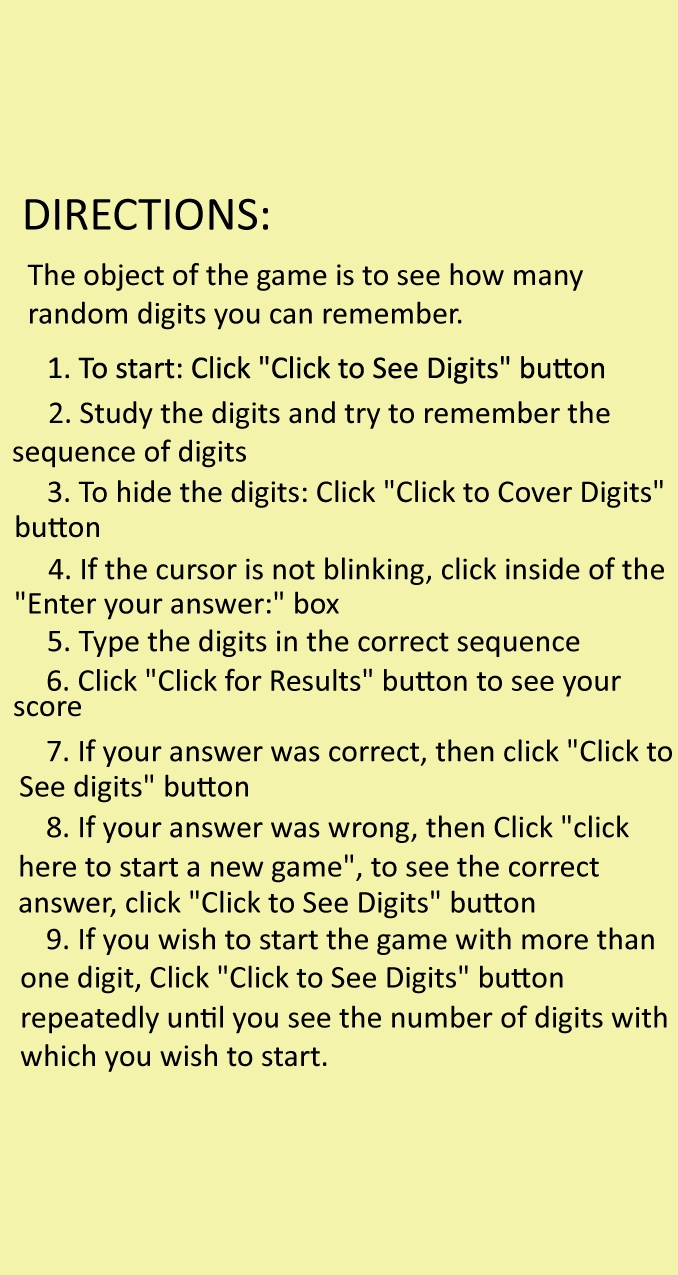
<style>
.page{position:relative;width:678px;height:1275px;background:#f3f3ab}
.page>*{position:absolute;margin:0}
.t1{font:48px "Calibri";color:#000000}
.t2{font:32px "Calibri";color:#000000}
</style>
<div class="page">
<p class="t1" style="left:25px;top:198px;width:243px;height:32px">DIRECTIONS:</p>
<p class="t2" style="left:27px;top:263px;width:556px;height:67px">The object of the game is to see how many <br>random digits you can remember.</p>
<p class="t2" style="left:49px;top:356px;width:555px;height:28px">1. To start: Click "Click to See Digits" button</p>
<p class="t2" style="left:49px;top:401px;width:561px;height:28px">2. Study the digits and try to remember the</p>
<p class="t2" style="left:13px;top:439px;width:233px;height:29px">sequence of digits</p>
<p class="t2" style="left:48px;top:480px;width:615px;height:28px">3. To hide the digits: Click "Click to Cover Digits"</p>
<p class="t2" style="left:16px;top:515px;width:83px;height:23px">button</p>
<p class="t2" style="left:48px;top:557px;width:616px;height:28px">4. If the cursor is not blinking, click inside of the</p>
<p class="t2" style="left:16px;top:591px;width:323px;height:29px">"Enter your answer:" box</p>
<p class="t2" style="left:48px;top:629px;width:532px;height:28px">5. Type the digits in the correct sequence</p>
<p class="t2" style="left:47px;top:668px;width:574px;height:29px">6. Click "Click for Results" button to see your</p>
<p class="t2" style="left:14px;top:701px;width:67px;height:16px">score</p>
<p class="t2" style="left:47px;top:739px;width:625px;height:28px">7. If your answer was correct, then click "Click to</p>
<p class="t2" style="left:20px;top:774px;width:228px;height:29px">See digits" button</p>
<p class="t2" style="left:47px;top:815px;width:582px;height:28px">8. If your answer was wrong, then Click "click</p>
<p class="t2" style="left:20px;top:854px;width:579px;height:29px">here to start a new game", to see the correct</p>
<p class="t2" style="left:19px;top:890px;width:516px;height:29px">answer, click "Click to See Digits" button</p>
<p class="t2" style="left:47px;top:927px;width:607px;height:28px">9. If you wish to start the game with more than</p>
<p class="t2" style="left:21px;top:965px;width:542px;height:29px">one digit, Click "Click to See Digits" button</p>
<p class="t2" style="left:20px;top:1005px;width:647px;height:67px">repeatedly until you see the number of digits with <br>which you wish to start.</p>
</div>
